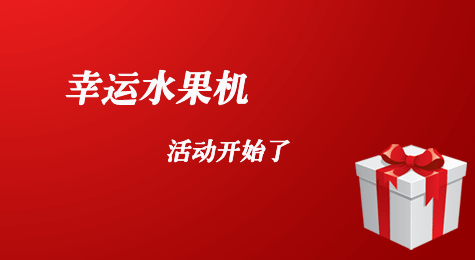
<style>
.page{position:relative;width:475px;height:260px}
.page>*{position:absolute;margin:0}
.t1{font:36px "CTLaoSongSJ";color:#f9fafc;font-weight:bold;font-style:italic}
.t2{font:24px "CTLaoSongSJ";color:#f9fafc;font-weight:bold;font-style:italic}
</style>
<div class="page">
<p class="t1" style="left:65px;top:69px;width:183px;height:37px">幸运水果机</p>
<p class="t2" style="left:167px;top:139px;width:123px;height:24px">活动开始了</p>
</div>
